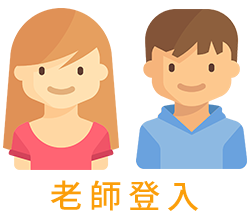
<style>
.page{position:relative;width:250px;height:211px;background:#ffffff}
.page>*{position:absolute;margin:0}
.t1{font:32.7px "NotoSansCJKtc-Medium";letter-spacing:0.2em;color:#fb9e0a}
</style>
<div class="page">
<p class="t1" style="left:50px;top:180px;width:149px;height:31px">老師登入</p>
</div>
